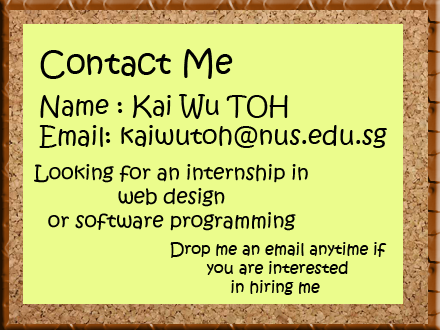
<style>
.page{position:relative;width:440px;height:330px;background:#ebfc8c}
.page>*{position:absolute;margin:0}
.t1{font:32px "KristenITC-Regular";color:#000000}
.t2{font:25px "KristenITC-Regular";color:#000000}
.t3{font:19.6px "KristenITC-Regular";color:#000000}
.t4{font:15.9px "KristenITC-Regular";color:#000000}
</style>
<div class="page">
<p class="t1" style="left:40px;top:48px;width:193px;height:31px">Contact Me</p>
<p class="t2" style="left:39px;top:94px;width:348px;height:54px">Name : Kai Wu TOH<br>Email: kaiwutoh@nus.edu.sg</p>
<p class="t3" style="left:34px;top:164px;width:274px;height:67px;text-align:center">Looking for an internship in <br>web design <br>or software programming</p>
<p class="t4" style="left:170px;top:242px;width:217px;height:53px;text-align:center">Drop me an email anytime if<br> you are interested <br>in hiring me</p>
</div>
